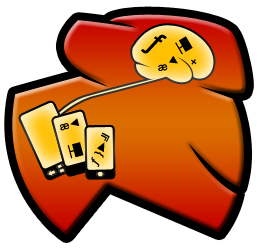
<style>
.page{position:relative;width:260px;height:249px;background:#ffffff}
.page>*{position:absolute;margin:0}
.t1{font:27.1px "ArialMT";color:#000000;font-weight:bold}
.t2{font:10.9px "ArialMT";color:#000000;font-weight:bold}
.t3{font:10.9px "ArialMT";color:#000000;font-weight:bold;scale:1.08 1}
</style>
<div class="page">
<p class="t1" style="left:141px;top:34px;width:37px;height:30px;rotate:33deg"><span class="t2"> </span>ƒ<span class="t2">    ►</span></p>
<p class="t2" style="left:175px;top:36px;width:18px;height:19px;rotate:-31deg">├█</p>
<p class="t2" style="left:158px;top:59px;width:39px;height:12px;rotate:-9deg">æ       ×</p>
<p class="t2" style="left:60px;top:118px;width:24px;height:41px;rotate:-15deg">æ◄<br><br>├█</p>
<p class="t3" style="left:91px;top:132px;width:19px;height:36px;rotate:-63deg">ƒ }►╝</p>
</div>
